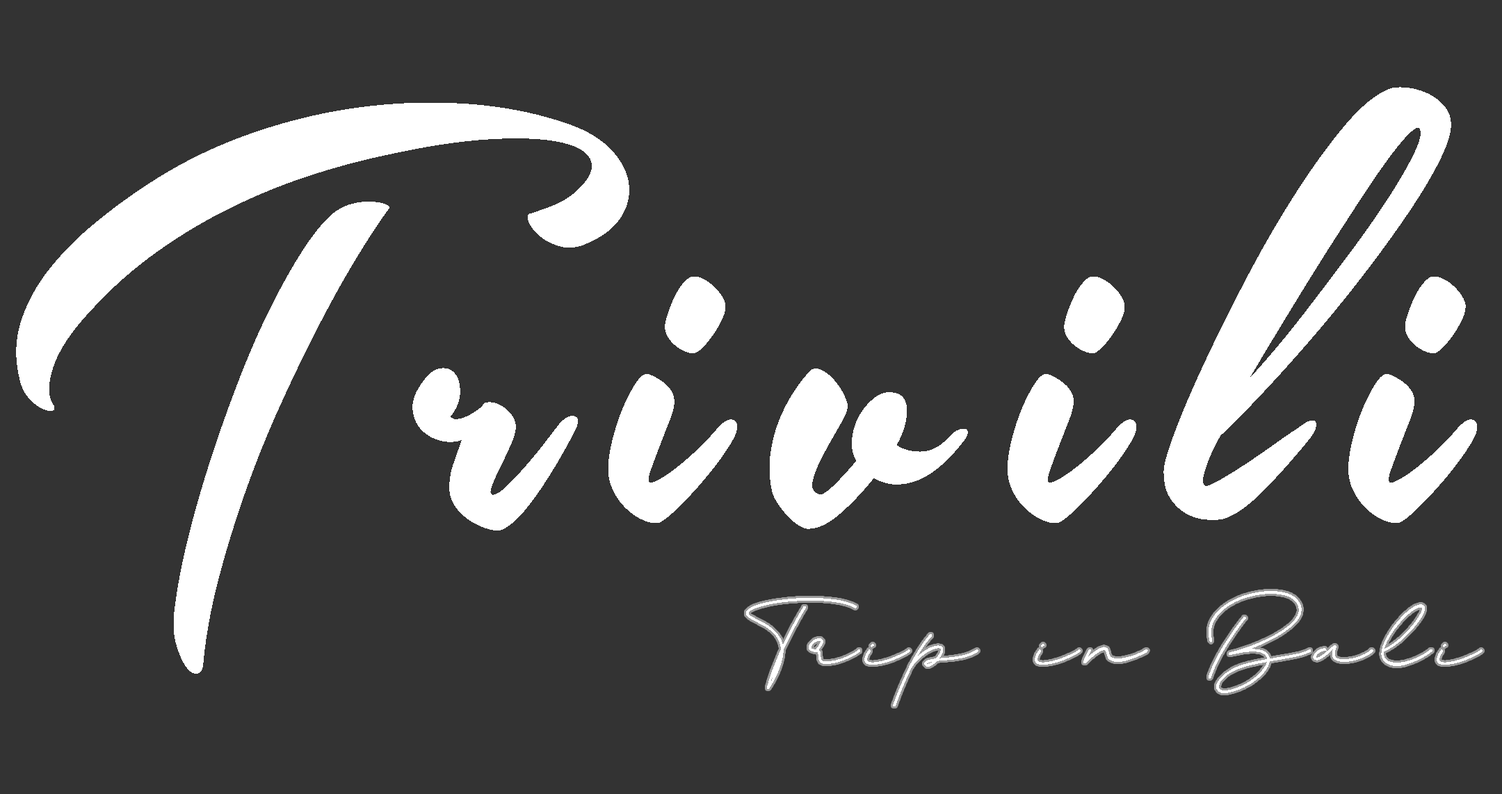
<style>
.page{position:relative;width:1502px;height:794px;background:#333333}
.page>*{position:absolute;margin:0}
.t1{font:785.2px "SouthernAirePersonalUseOnly";letter-spacing:0.1em;color:#ffffff;scale:0.77 1}
.t2{font:142.2px "Magenta";letter-spacing:0.075em;color:#ffffff}
</style>
<div class="page">
<p class="t1" style="left:16px;top:87px;width:1461px;height:587px">Trivili</p>
<p class="t2" style="left:746px;top:591px;width:736px;height:115px">Trip in Bali</p>
</div>
